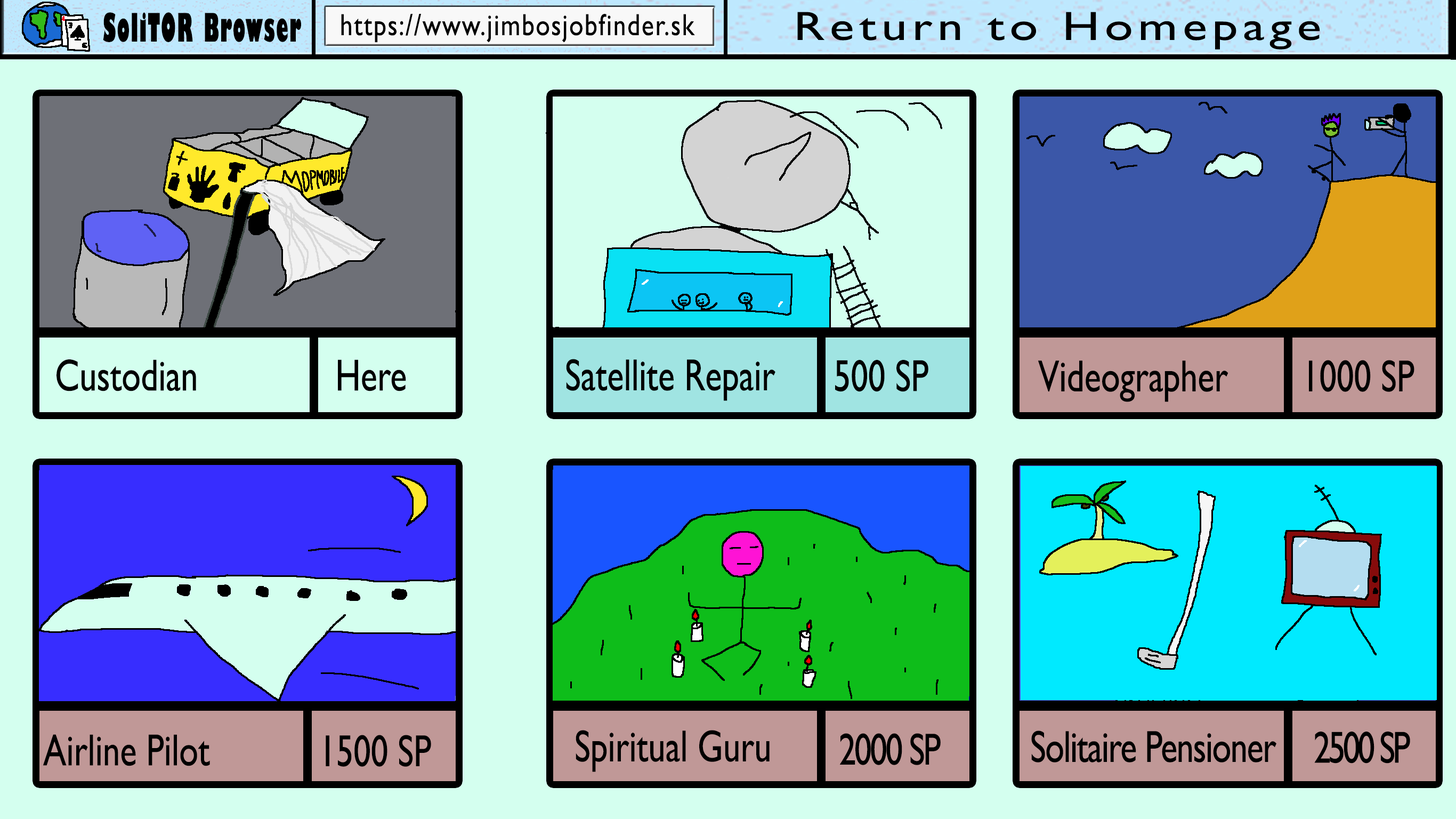
<style>
.page{position:relative;width:1456px;height:819px;background:#d4ffef}
.page>*{position:absolute;margin:0}
.t1{font:38.4px "GillSans-UltraBoldCondensed";letter-spacing:0.05em;color:#000000;scale:0.67 1}
.t2{font:30.7px "GillSansMT";letter-spacing:0.05em;color:#000000;scale:0.83 1}
.t3{font:40.9px "GillSansMT";letter-spacing:0.1em;color:#000000;scale:1.25 1}
.t4{font:45px "GillSansMT";color:#000000;scale:0.77 1}
.t5{font:45px "GillSansMT";letter-spacing:-0.05em;color:#000000;scale:0.77 1}
.t6{font:45px "GillSansMT";letter-spacing:-0.025em;color:#000000;scale:0.77 1}
.t7{font:45px "GillSansMT";letter-spacing:-0.075em;color:#000000;scale:0.77 1}
</style>
<div class="page">
<p class="t1" style="left:103px;top:12px;width:198px;height:30px">SoliTOR Browser</p>
<p class="t2" style="left:341px;top:14px;width:354px;height:29px">https://www.jimbosjobfinder.sk</p>
<p class="t3" style="left:797px;top:12px;width:523px;height:38px">Return to Homepage</p>
<p class="t4" style="left:57px;top:359px;width:139px;height:32px">Custodian</p>
<p class="t4" style="left:338px;top:359px;width:68px;height:32px">Here</p>
<p class="t4" style="left:566px;top:359px;width:210px;height:42px">Satellite Repair</p>
<p class="t4" style="left:835px;top:360px;width:94px;height:32px">500 SP</p>
<p class="t4" style="left:1038px;top:360px;width:191px;height:42px">Videographer</p>
<p class="t4" style="left:1309px;top:360px;width:106px;height:32px">1000 SP</p>
<p class="t4" style="left:43px;top:734px;width:167px;height:32px">Airline Pilot</p>
<p class="t4" style="left:326px;top:735px;width:105px;height:32px">1500 SP</p>
<p class="t4" style="left:576px;top:730px;width:194px;height:42px">Spiritual Guru</p>
<p class="t5" style="left:840px;top:733px;width:101px;height:32px">2000 SP</p>
<p class="t6" style="left:1031px;top:730px;width:246px;height:32px">Solitaire Pensioner</p>
<p class="t7" style="left:1315px;top:731px;width:95px;height:32px">2500 SP</p>
</div>
